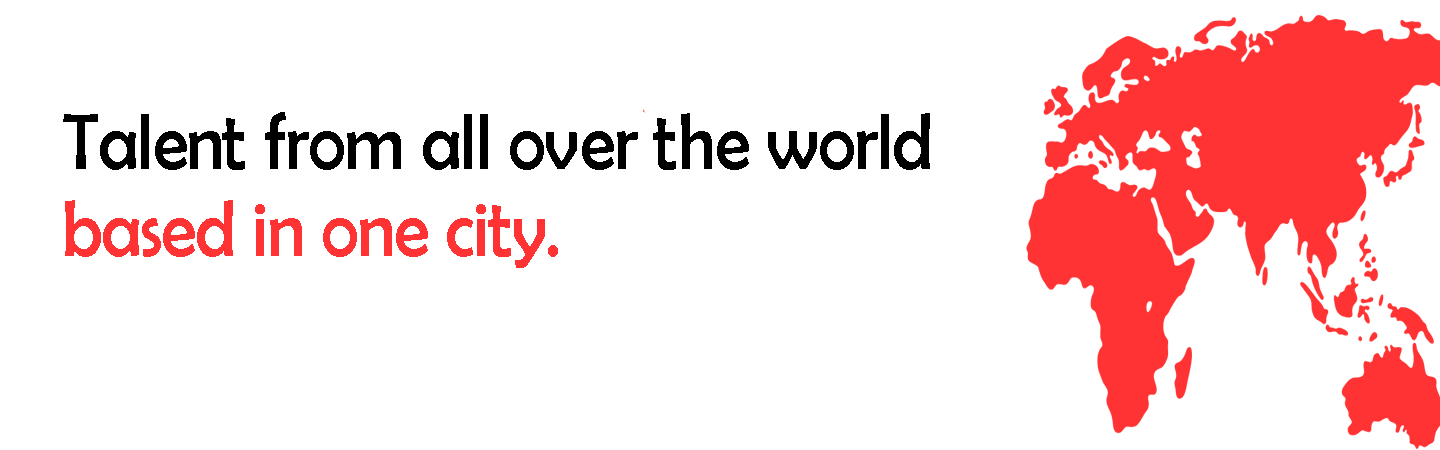
<style>
.page{position:relative;width:1440px;height:450px;background:#ffffff}
.page>*{position:absolute;margin:0}
.t1{font:80px/86.6px "BerlinSansFB-Reg";letter-spacing:-0.01em;color:#000000;scale:0.9 1}
.t2{font:80px/86.6px "BerlinSansFB-Reg";letter-spacing:-0.01em;color:#ff3333;scale:0.9 1}
</style>
<div class="page">
<p class="t1" style="left:63px;top:112px;width:867px;height:156px">Talent from all over the world<br><span class="t2">based in one city.</span></p>
</div>
